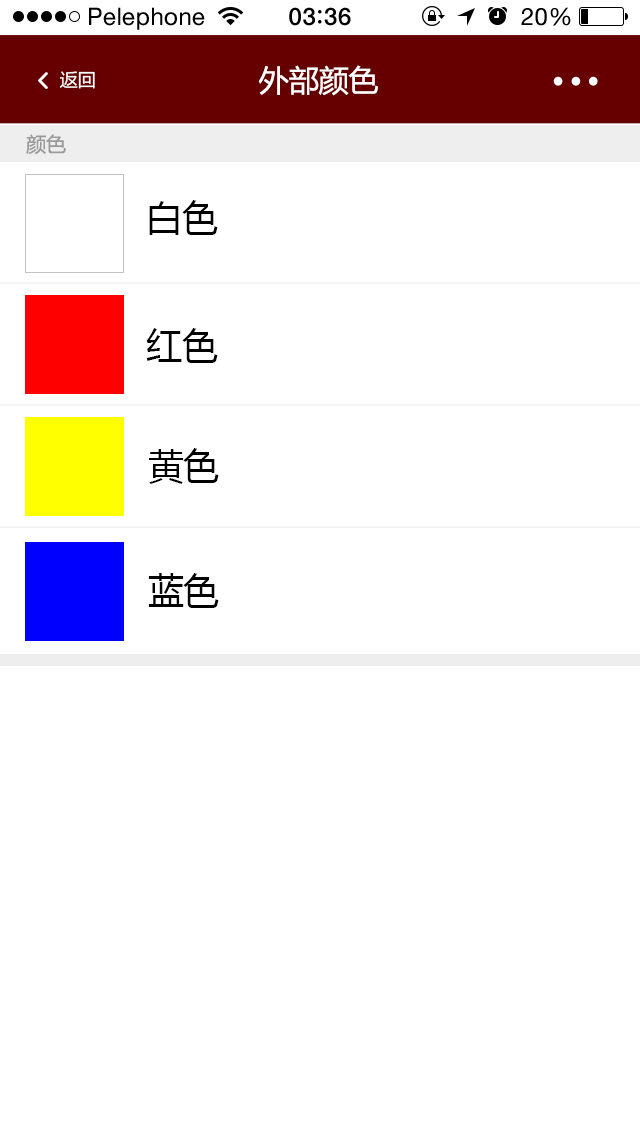
<style>
.page{position:relative;width:640px;height:1138px;background:#ffffff}
.page>*{position:absolute;margin:0}
.t1{font:24px "HelveticaNeue";letter-spacing:0.02em;color:#000000}
.t2{font:24px "HelveticaNeue-Medium";letter-spacing:0.03em;color:#000000}
.t3{font:29.9px "MicrosoftYaHei";color:#ffffff}
.t4{font:18px "MicrosoftYaHei";color:#ffffff}
.t5{font:20px "MicrosoftYaHei";color:#999999}
.t6{font:36px "MicrosoftYaHei";color:#000000}
</style>
<div class="page">
<p class="t1" style="left:89px;top:7px;width:116px;height:23px">Pelephone</p>
<p class="t2" style="left:289px;top:7px;width:62px;height:19px">03 36</p>
<p class="t1" style="left:521px;top:7px;width:50px;height:19px">20%</p>
<p class="t3" style="left:258px;top:65px;width:120px;height:31px">外部颜色</p>
<p class="t4" style="left:60px;top:71px;width:35px;height:18px">返回</p>
<p class="t5" style="left:26px;top:134px;width:40px;height:21px">颜色</p>
<p class="t6" style="left:149px;top:200px;width:69px;height:35px">白色</p>
<p class="t6" style="left:146px;top:328px;width:72px;height:35px">红色</p>
<p class="t6" style="left:149px;top:448px;width:70px;height:36px">黄色</p>
<p class="t6" style="left:148px;top:573px;width:71px;height:35px">蓝色</p>
</div>
